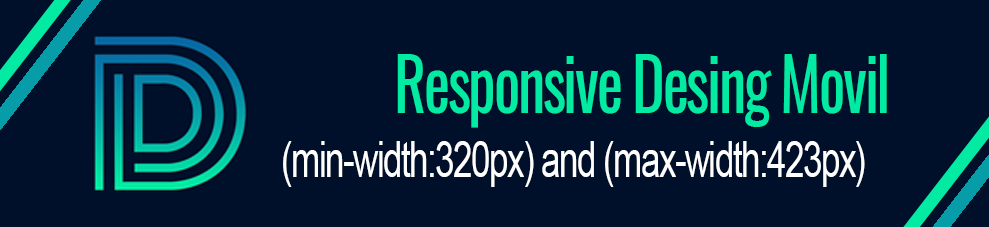
<style>
.page{position:relative;width:989px;height:227px;background:#00102a}
.page>*{position:absolute;margin:0}
.t1{font:74.4px "Oswald-Regular";letter-spacing:-0.04em;color:#03eaa2;scale:0.84 1}
.t2{font:49.6px "ArialMT";letter-spacing:-0.04em;color:#ffffff;scale:0.7 1}
</style>
<div class="page">
<p class="t1" style="left:397px;top:54px;width:490px;height:74px">Responsive Desing Movil</p>
<p class="t2" style="left:283px;top:141px;width:582px;height:46px">(min-width:320px) and (max-width:423px)</p>
</div>
